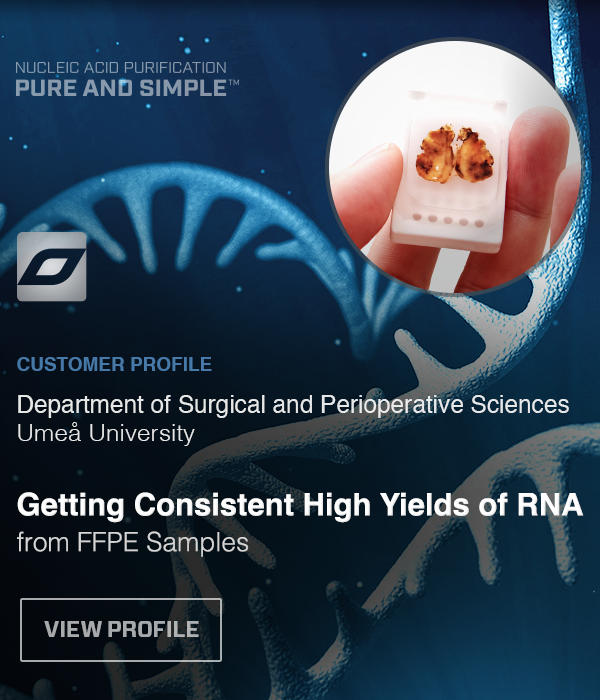
<style>
.page{position:relative;width:600px;height:700px}
.page>*{position:absolute;margin:0}
.t1{font:19px "Helvetica-Bold";color:#427cbf;text-transform:uppercase}
.t2{font:24.4px/28.4px "Helvetica";color:#e6e7e7}
.t3{font:24.4px/28.4px "Helvetica-Light";color:#e6e7e7}
.t4{font:31px/35.9px "Helvetica-Bold";color:#ffffff}
.t5{font:26.5px/35.9px "Helvetica-Light";color:#d6d6d6}
.t6{font:21.9px "Forza-Bold";letter-spacing:-0.01em;color:#a7aaac;text-transform:uppercase}
</style>
<div class="page">
<p class="t1" style="left:17px;top:357px;width:195px;height:14px;opacity:0.5">Customer Profile</p>
<p class="t2" style="left:18px;top:395px;width:551px;height:51px">Department of Surgical and Perioperative Sciences<br><span class="t3">Umeå University</span></p>
<p class="t4" style="left:17px;top:492px;width:567px;height:65px">Getting Consistent High Yields of RNA<br><span class="t5">from FFPE Samples</span></p>
<p class="t6" style="left:44px;top:621px;width:155px;height:16px">View Profile</p>
</div>
